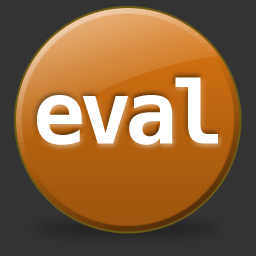
<style>
.page{position:relative;width:256px;height:256px;background:#333333}
.page>*{position:absolute;margin:0}
.t1{font:86.8px "Menlo-Bold";letter-spacing:-0.07em;color:#ffffff}
</style>
<div class="page">
<p class="t1" style="left:37px;top:77px;width:181px;height:68px">eval</p>
</div>
